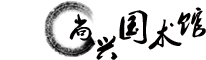
<style>
.page{position:relative;width:206px;height:60px;background:#ffffff}
.page>*{position:absolute;margin:0}
.t1{font:26.6px "Ò¶¸ùÓÑÃ«±ÊÐÐÊé¼òÌå";color:#030000;text-transform:uppercase}
.t2{font:30.9px "Ò¶¸ùÓÑÃ«±ÊÐÐÊé¼òÌå";color:#030000;text-transform:uppercase}
</style>
<div class="page">
<p class="t1" style="left:69px;top:13px;width:23px;height:28px">尚</p>
<p class="t2" style="left:119px;top:10px;width:29px;height:35px">国</p>
<p class="t2" style="left:177px;top:7px;width:29px;height:31px">馆</p>
<p class="t2" style="left:148px;top:19px;width:34px;height:31px">术</p>
<p class="t2" style="left:96px;top:35px;width:22px;height:25px">兴</p>
</div>
